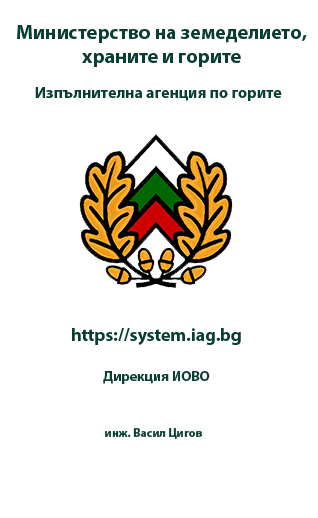
<style>
.page{position:relative;width:318px;height:518px;background:#ffffff}
.page>*{position:absolute;margin:0}
.t1{font:20px "MyriadPro-Bold";color:#093e33}
.t2{font:16px "MyriadPro-Bold";color:#093e33}
.t3{font:18px "MyriadPro-Bold";color:#093e33}
.t4{font:14px "MyriadPro-Bold";color:#093e33}
.t5{font:12px "MyriadPro-Bold";color:#093e33}
</style>
<div class="page">
<p class="t1" style="left:17px;top:25px;width:290px;height:42px;text-align:center">Министерство на земеделието,<br>храните и горите</p>
<p class="t2" style="left:35px;top:87px;width:247px;height:14px">Изпълнителна агенция по горите</p>
<p class="t3" style="left:72px;top:328px;width:169px;height:17px">https://system.iag.bg</p>
<p class="t4" style="left:103px;top:371px;width:107px;height:13px">Дирекция ИОВО</p>
<p class="t5" style="left:105px;top:428px;width:98px;height:11px">инж. Васил Цигов</p>
</div>
